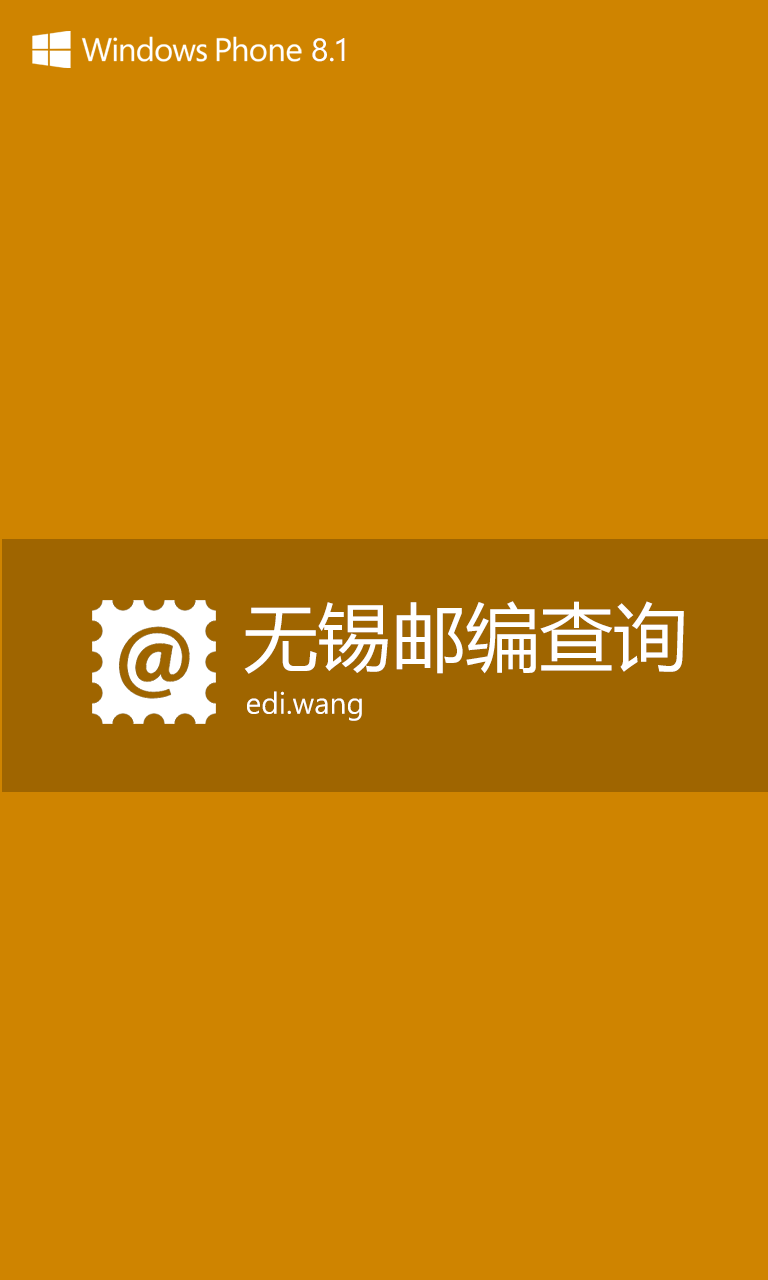
<style>
.page{position:relative;width:768px;height:1280px;background:#cf8400}
.page>*{position:absolute;margin:0}
.t1{font:32px "SegoeWP";color:#ffffff}
.t2{font:74px "MicrosoftYaHei";color:#ffffff}
.t3{font:30px "SegoeWP";color:#ffffff}
</style>
<div class="page">
<p class="t1" style="left:312px;top:38px;width:33px;height:24px">8.1</p>
<p class="t2" style="left:244px;top:601px;width:440px;height:73px">无锡邮编查询</p>
<p class="t3" style="left:247px;top:691px;width:115px;height:30px">edi.wang</p>
</div>
